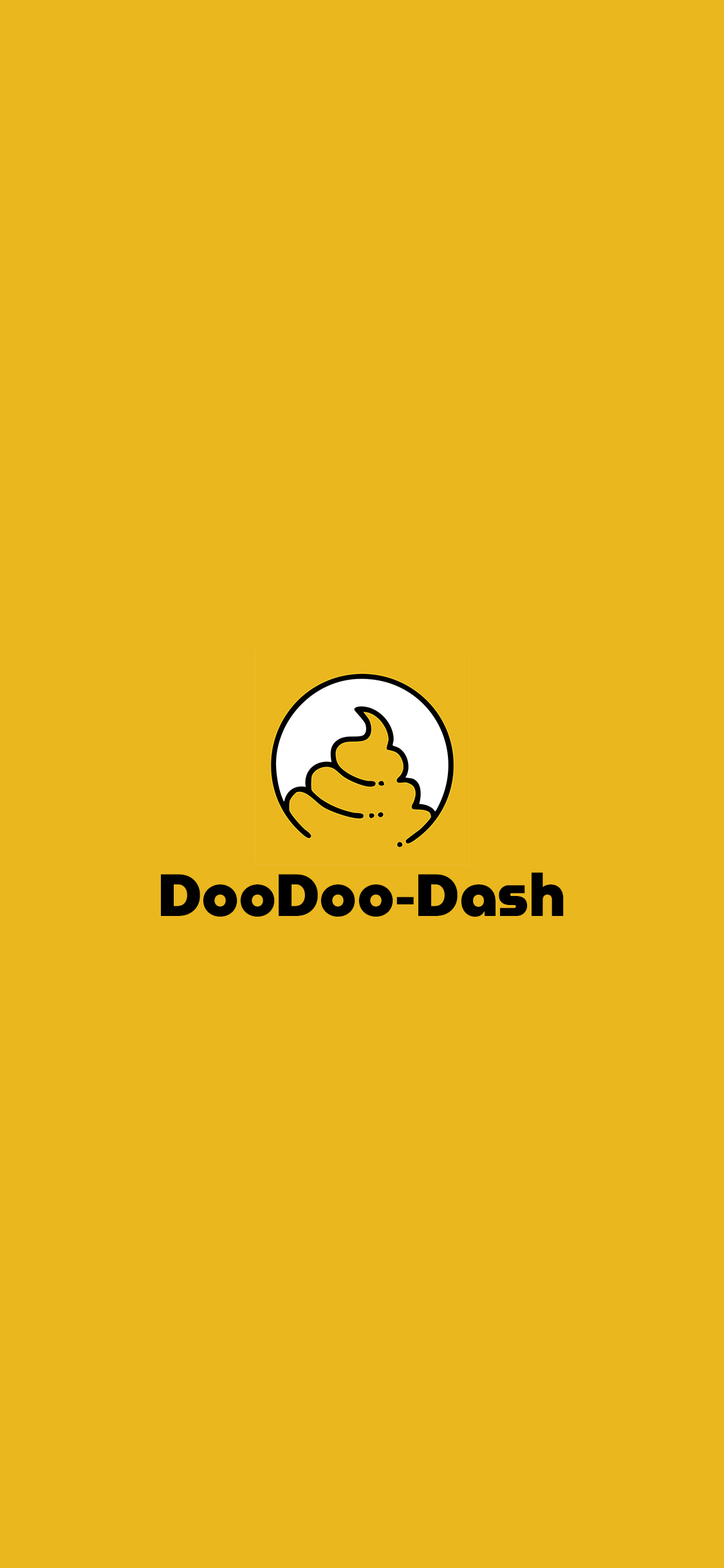
<style>
.page{position:relative;width:724px;height:1568px;background:#eab71e}
.page>*{position:absolute;margin:0}
.t1{font:59.5px "MuseoModerno-Black";color:#000000}
</style>
<div class="page">
<p class="t1" style="left:161px;top:872px;width:403px;height:45px">DooDoo-Dash</p>
</div>
